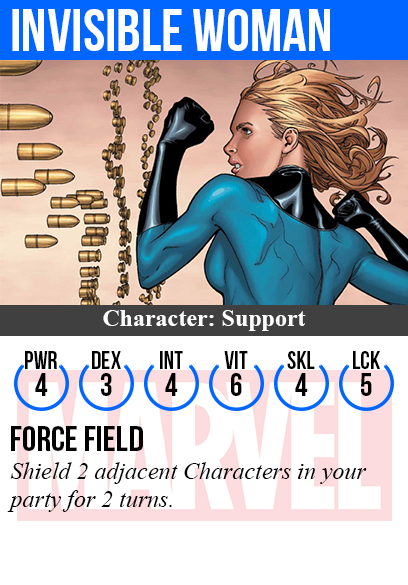
<style>
.page{position:relative;width:408px;height:585px;background:#ffffff}
.page>*{position:absolute;margin:0}
.t1{font:60px "BebasNeue";color:#ffffff}
.t2{font:24px "TimesNewRomanPS-BoldMT";color:#ffffff}
.t3{font:25px "BebasNeue";color:#000000}
.t4{font:32px "BebasNeue";color:#000000}
.t5{font:36px "BebasNeue";color:#000000}
.t6{font:24px "TimesNewRomanPS-ItalicMT";color:#000000}
</style>
<div class="page">
<p class="t1" style="left:12px;top:9px;width:318px;height:42px">invisible woman</p>
<p class="t2" style="left:103px;top:310px;width:203px;height:21px">Character: Support</p>
<p class="t3" style="left:25px;top:351px;width:32px;height:18px">PWR</p>
<p class="t3" style="left:92px;top:351px;width:29px;height:18px">dex</p>
<p class="t3" style="left:160px;top:351px;width:23px;height:18px">int</p>
<p class="t3" style="left:224px;top:351px;width:24px;height:18px">vit</p>
<p class="t3" style="left:287px;top:351px;width:28px;height:18px">skl</p>
<p class="t3" style="left:353px;top:351px;width:27px;height:18px">lck</p>
<p class="t4" style="left:35px;top:373px;width:13px;height:23px">4</p>
<p class="t4" style="left:101px;top:373px;width:11px;height:23px">3</p>
<p class="t4" style="left:165px;top:373px;width:13px;height:23px">4</p>
<p class="t4" style="left:231px;top:373px;width:11px;height:23px">6</p>
<p class="t4" style="left:295px;top:373px;width:13px;height:23px">4</p>
<p class="t4" style="left:361px;top:373px;width:11px;height:23px">5</p>
<p class="t5" style="left:11px;top:426px;width:132px;height:25px">force field</p>
<p class="t6" style="left:7px;top:462px;width:360px;height:50px">Shield 2 adjacent Characters in your<br>party for 2 turns.</p>
</div>
